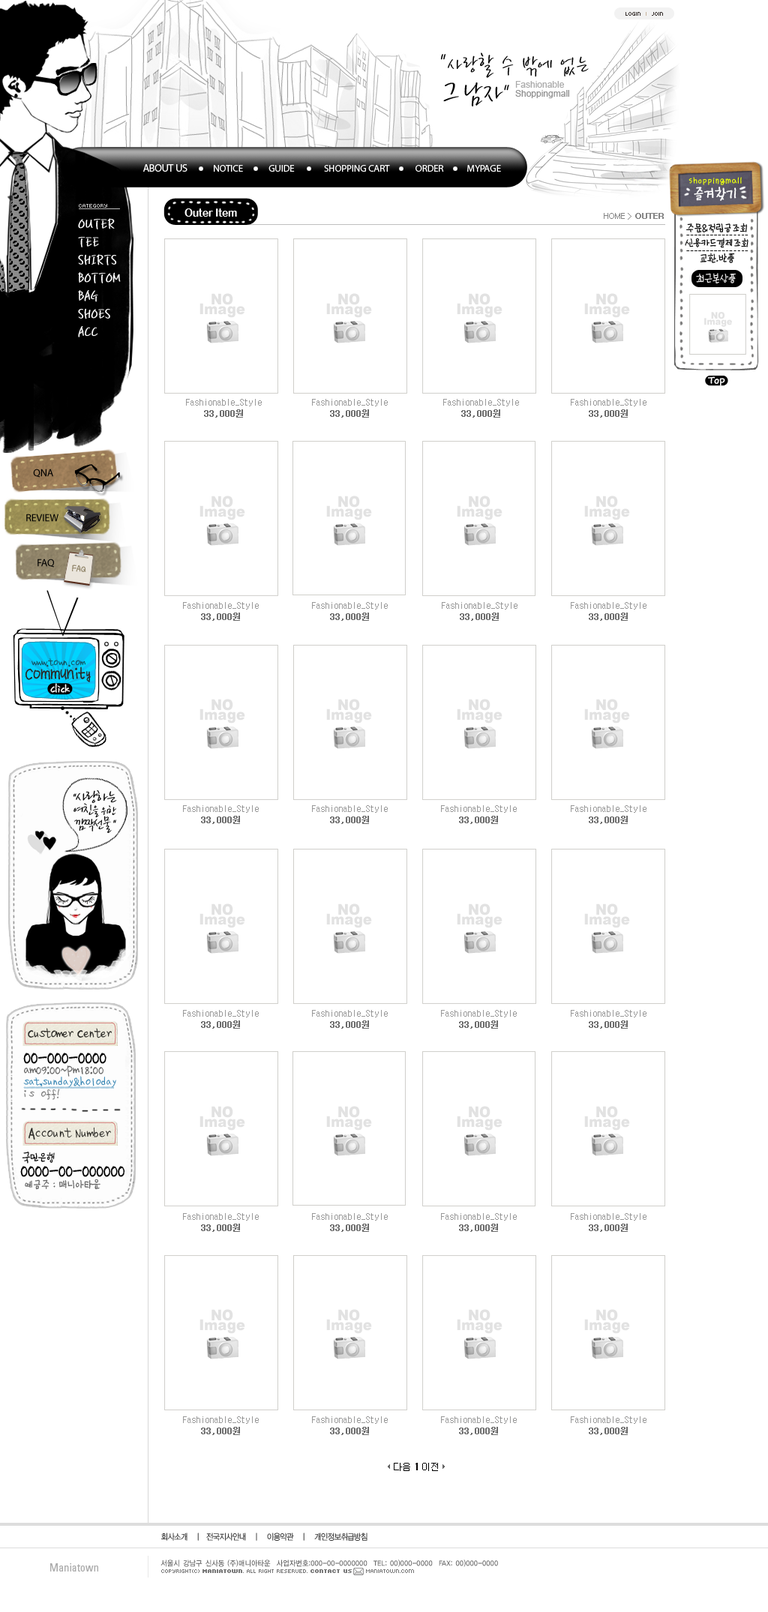
<style>
.page{position:relative;width:768px;height:1612px;background:#ffffff}
.page>*{position:absolute;margin:0}
.t1{font:6px "Kroeger0555";color:#362f2d}
.t2{font:6px "Kroeger0555";color:#c7b299}
.t3{font:26.2px/11.1px "YDBomnalM";color:#000000;scale:0.85 1}
.t4{font:39px/30.6px "YDBomnalM";color:#000000;scale:0.85 1}
.t5{font:33.8px/30.6px "YDBomnalM";color:#000000;scale:0.85 1}
.t6{font:26.2px/30.6px "YDBomnalM";color:#000000;scale:0.85 1}
.t7{font:9px/8.8px "ArialMT";color:#909090}
.t8{font:9px/8.8px "ArialMT";color:#aaaaaa}
.t9{font:9.8px "MyriadPro-Regular";letter-spacing:-0.01em;color:#ffffff;text-transform:uppercase}
.t10{font:10.5px "MyriadPro-Regular";letter-spacing:-0.01em;color:#ffffff;text-transform:uppercase}
.t11{font:9.8px "YDSDJ";letter-spacing:-0.02em;color:#ebff0a;scale:0.9 1}
.t12{font:6px "Kroeger0555";color:#bfbebe;text-decoration:underline}
.t13{font:11.2px "ArialRoundedMTBold";color:#ffffff;scale:0.9 1}
.t14{font:18px/18px "YDBomnalM";color:#ffffff;font-weight:bold;scale:0.85 1}
.t15{font:8.2px "Dotum";letter-spacing:-0.08em;color:#858585}
.t16{font:8.2px "Dotum";letter-spacing:-0.08em;color:#858585;font-weight:bold}
.t17{font:12.6px/15px "YDSDJ";letter-spacing:-0.135em;color:#000000;scale:0.95 1}
.t18{font:12.6px "YDSDJ";letter-spacing:-0.135em;color:#fffefe;scale:0.95 1}
.t19{font:9px "DotumChe";color:#999999}
.t20{font:9px "DotumChe";color:#6d6d6d;font-weight:bold}
.t21{font:10.5px "MyriadPro-Regular";letter-spacing:-0.01em;color:#000000;text-transform:uppercase}
.t22{font:10.5px "YDSDJ";letter-spacing:-0.07em;color:#91856a;font-weight:bold;scale:0.8 1}
.t23{font:9.8px/13.5px "¹ÎÀ±ÈñÃ¼";letter-spacing:-0.02em;color:#125362;font-weight:bold;scale:0.9 1}
.t24{font:15px/13.5px "¹Ú¸íÈñÃ¼";letter-spacing:-0.02em;color:#292824;font-weight:bold;scale:0.9 1}
.t25{font:18px "¹ÎÀ±ÈñÃ¼";letter-spacing:-0.04em;color:#000000;font-weight:bold;scale:0.8 1}
.t26{font:12px "¹ÎÀ±ÈñÃ¼";color:#5d5d5d;scale:0.9 1}
.t27{font:10.1px/12px "¹ÎÀ±ÈñÃ¼";color:#3283b2;scale:0.94 1}
.t28{font:10.1px/12px "¹ÎÀ±ÈñÃ¼";color:#717171;scale:0.94 1}
.t29{font:13.5px "YDSDJ";letter-spacing:-0.12em;color:#000000;scale:0.9 1}
.t30{font:13.5px "YDSDJ";letter-spacing:-0.12em;color:#5d5d5d;scale:0.9 1}
.t31{font:9px "New-Gulim";letter-spacing:0.02em;color:#000000}
.t32{font:9px "New-Gulim";letter-spacing:0.02em;color:#030000;font-weight:bold}
.t33{font:8.2px "YDIYGO310";letter-spacing:-0.03em;color:#393939;scale:0.9 1}
.t34{font:10.8px "Univers-Condensed";color:#aaaaaa}
.t35{font:7.5px "YDIYGO130-KSCPC-EUC-H";letter-spacing:-0.05em;color:#666666;scale:0.9 1}
.t36{font:6px "Kroeger0555";color:#7a7a7a}
.t37{font:6px "Kroeger0555";color:#7a7a7a;font-weight:bold}
</style>
<div class="page">
<p class="t1" style="left:626px;top:12px;width:37px;height:4px">Login  <span class="t2">I</span>  Join</p>
<p class="t3" style="left:440px;top:52px;width:149px;height:54px">"사랑할 수 밖에 없는<br><span class="t4">그</span><span class="t5">남자</span><span class="t6">"</span></p>
<p class="t7" style="left:515px;top:81px;width:54px;height:17px"><span class="t8">Fashionable<br></span>Shoppingmall</p>
<p class="t9" style="left:143px;top:164px;width:358px;height:8px"><span class="t10">about US</span>             Notice             Guide               SHOPPING Cart             Order            Mypage</p>
<p class="t11" style="left:688px;top:177px;width:54px;height:8px">shoppingmall</p>
<p class="t12" style="left:79px;top:204px;width:41px;height:5px">category</p>
<p class="t13" style="left:184px;top:208px;width:53px;height:9px">Outer Item</p>
<p class="t14" style="left:78px;top:218px;width:43px;height:120px">OUTER<br>TEE<br>SHIRTS<br>BOTTOM<br>BAG<br>SHOES<br>ACC</p>
<p class="t15" style="left:604px;top:213px;width:60px;height:7px">HOME &gt; <span class="t16">OUTER</span></p>
<p class="t17" style="left:685px;top:223px;width:63px;height:40px;text-align:center;rotate:-1deg">주문&amp;적립금조회<br>신용카드결제조회<br>교환.반품</p>
<p class="t18" style="left:696px;top:273px;width:40px;height:11px;rotate:-1deg">최근본상품</p>
<p class="t19" style="left:186px;top:399px;width:76px;height:19px;text-align:center">Fashionable_Style<br><span class="t20">33,000원</span></p>
<p class="t19" style="left:312px;top:399px;width:76px;height:19px;text-align:center">Fashionable_Style<br><span class="t20">33,000원</span></p>
<p class="t19" style="left:443px;top:399px;width:76px;height:19px;text-align:center">Fashionable_Style<br><span class="t20">33,000원</span></p>
<p class="t19" style="left:571px;top:399px;width:75px;height:19px;text-align:center">Fashionable_Style<br><span class="t20">33,000원</span></p>
<p class="t21" style="left:33px;top:469px;width:20px;height:9px">QNA</p>
<p class="t21" style="left:26px;top:514px;width:32px;height:8px">REVIEW</p>
<p class="t21" style="left:38px;top:559px;width:16px;height:9px">FAQ</p>
<p class="t22" style="left:72px;top:565px;width:14px;height:7px;rotate:6deg">FAQ</p>
<p class="t19" style="left:183px;top:602px;width:76px;height:19px;text-align:center">Fashionable_Style<br><span class="t20">33,000원</span></p>
<p class="t19" style="left:312px;top:602px;width:76px;height:19px;text-align:center">Fashionable_Style<br><span class="t20">33,000원</span></p>
<p class="t19" style="left:442px;top:602px;width:76px;height:19px;text-align:center">Fashionable_Style<br><span class="t20">33,000원</span></p>
<p class="t19" style="left:571px;top:602px;width:75px;height:19px;text-align:center">Fashionable_Style<br><span class="t20">33,000원</span></p>
<p class="t23" style="left:26px;top:658px;width:65px;height:24px;text-align:center">www.town.com<br><span class="t24">Community</span></p>
<p class="t19" style="left:183px;top:806px;width:76px;height:18px;text-align:center">Fashionable_Style<br><span class="t20">33,000원</span></p>
<p class="t19" style="left:312px;top:806px;width:76px;height:18px;text-align:center">Fashionable_Style<br><span class="t20">33,000원</span></p>
<p class="t19" style="left:441px;top:806px;width:76px;height:18px;text-align:center">Fashionable_Style<br><span class="t20">33,000원</span></p>
<p class="t19" style="left:571px;top:806px;width:75px;height:18px;text-align:center">Fashionable_Style<br><span class="t20">33,000원</span></p>
<p class="t19" style="left:183px;top:1010px;width:76px;height:19px;text-align:center">Fashionable_Style<br><span class="t20">33,000원</span></p>
<p class="t19" style="left:312px;top:1010px;width:76px;height:19px;text-align:center">Fashionable_Style<br><span class="t20">33,000원</span></p>
<p class="t19" style="left:441px;top:1010px;width:76px;height:19px;text-align:center">Fashionable_Style<br><span class="t20">33,000원</span></p>
<p class="t19" style="left:571px;top:1010px;width:75px;height:19px;text-align:center">Fashionable_Style<br><span class="t20">33,000원</span></p>
<p class="t25" style="left:23px;top:1053px;width:83px;height:11px">00-000-0000</p>
<p class="t26" style="left:24px;top:1066px;width:80px;height:11px">am09:00~pm18:00</p>
<p class="t27" style="left:23px;top:1076px;width:93px;height:24px">sat,sunday&amp;holoday<br><span class="t28">is off!</span></p>
<p class="t29" style="left:22px;top:1152px;width:33px;height:12px">국민은행</p>
<p class="t25" style="left:20px;top:1166px;width:105px;height:12px">0000-00-000000</p>
<p class="t30" style="left:25px;top:1179px;width:75px;height:11px">예금주 : 매니아타운</p>
<p class="t19" style="left:183px;top:1214px;width:76px;height:18px;text-align:center">Fashionable_Style<br><span class="t20">33,000원</span></p>
<p class="t19" style="left:312px;top:1214px;width:76px;height:18px;text-align:center">Fashionable_Style<br><span class="t20">33,000원</span></p>
<p class="t19" style="left:441px;top:1214px;width:76px;height:18px;text-align:center">Fashionable_Style<br><span class="t20">33,000원</span></p>
<p class="t19" style="left:571px;top:1214px;width:75px;height:18px;text-align:center">Fashionable_Style<br><span class="t20">33,000원</span></p>
<p class="t19" style="left:183px;top:1417px;width:76px;height:19px;text-align:center">Fashionable_Style<br><span class="t20">33,000원</span></p>
<p class="t19" style="left:312px;top:1417px;width:76px;height:19px;text-align:center">Fashionable_Style<br><span class="t20">33,000원</span></p>
<p class="t19" style="left:441px;top:1417px;width:76px;height:19px;text-align:center">Fashionable_Style<br><span class="t20">33,000원</span></p>
<p class="t19" style="left:571px;top:1417px;width:75px;height:19px;text-align:center">Fashionable_Style<br><span class="t20">33,000원</span></p>
<p class="t31" style="left:394px;top:1463px;width:44px;height:9px">다음 <span class="t32">1</span> 이전</p>
<p class="t33" style="left:161px;top:1533px;width:207px;height:8px">회사소개    |   전국지사안내    |    이용약관    |    개인정보취급방침</p>
<p class="t34" style="left:50px;top:1564px;width:48px;height:8px">Maniatown</p>
<p class="t35" style="left:160px;top:1560px;width:338px;height:8px">서울시 강남구 신사동 (주)매니아타운  사업자번호:000-00-0000000  TEL: 00)000-0000  FAX: 00)000-0000</p>
<p class="t36" style="left:161px;top:1570px;width:253px;height:4px">COPYRIGHT(C) <span class="t37">Maniatown</span>. ALL RIGHT RESERVED. <span class="t37">Contact Us   </span>  Maniatown.com</p>
</div>
